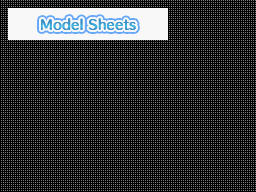
<style>
.page{position:relative;width:256px;height:192px;background:#000000}
.page>*{position:absolute;margin:0}
.t1{font:12.5px "HummingStd-B";letter-spacing:0.025em;color:#3997cc}
.t2{font:12.5px "HummingStd-B";letter-spacing:0.05em;color:#3997cc}
</style>
<div class="page">
<p class="t1" style="left:41px;top:18px;width:95px;height:12px">Model Sh<span class="t2">e</span>ets</p>
</div>
